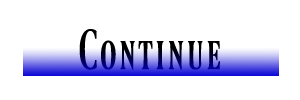
<style>
.page{position:relative;width:300px;height:100px;background:#ffffff}
.page>*{position:absolute;margin:0}
.t1{font:48px "Ferrum"}
</style>
<div class="page">
<p class="t1" style="left:79px;top:29px;width:141px;height:41px">Continue</p>
</div>
